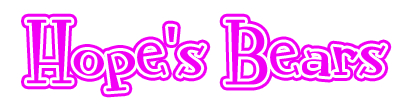
<style>
.page{position:relative;width:400px;height:112px;background:#ffffff}
.page>*{position:absolute;margin:0}
.t1{font:83.1px "RocknRollTypo";color:#f200f5}
</style>
<div class="page">
<p class="t1" style="left:27px;top:19px;width:359px;height:73px">Hope’s Bears</p>
<p class="t1" style="left:27px;top:19px;width:359px;height:73px">Hope’s Bears</p>
</div>
